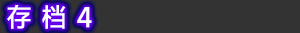
<style>
.page{position:relative;width:300px;height:33px;background:#333333}
.page>*{position:absolute;margin:0}
.t1{font:26px "MiSans-Medium";letter-spacing:0.35em;color:#ffffff}
</style>
<div class="page">
<p class="t1" style="left:7px;top:4px;width:85px;height:25px">存档4</p>
</div>
